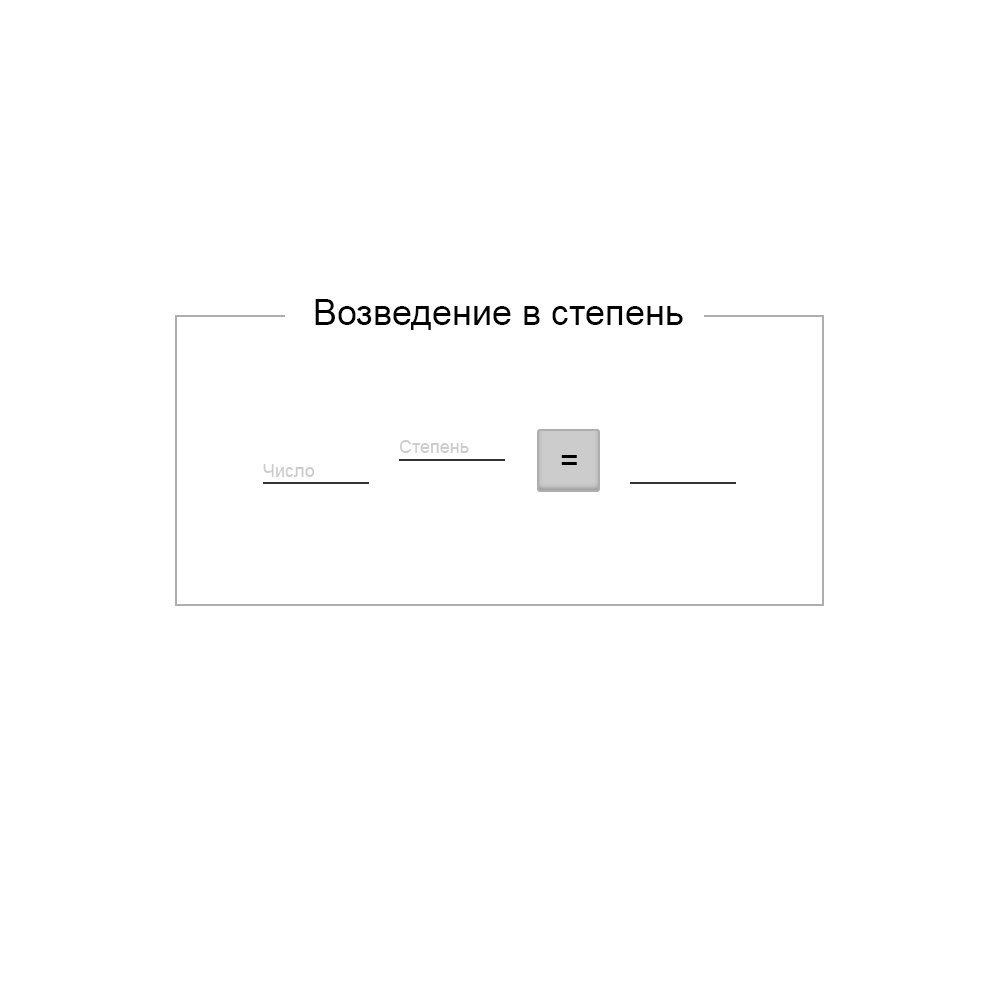
<style>
.page{position:relative;width:1000px;height:1000px;background:#ffffff}
.page>*{position:absolute;margin:0}
.t1{font:36px "ArialMT";color:#010101}
.t2{font:18px "ArialMT";color:#cccccc}
.t3{font:32px "ArialMT";color:#000000}
</style>
<div class="page">
<p class="t1" style="left:315px;top:299px;width:368px;height:31px">Возведение в степень</p>
<p class="t2" style="left:399px;top:440px;width:70px;height:13px">Степень</p>
<p class="t3" style="left:561px;top:455px;width:16px;height:10px">=</p>
<p class="t2" style="left:263px;top:464px;width:52px;height:13px">Число</p>
</div>
